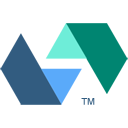
<style>
.page{position:relative;width:128px;height:128px;background:#ffffff}
.page>*{position:absolute;margin:0}
.t1{font:16.6px "ArialMT";color:#325c80}
</style>
<div class="page">
<p class="t1" style="left:81px;top:98px;width:14px;height:7px">™</p>
</div>
